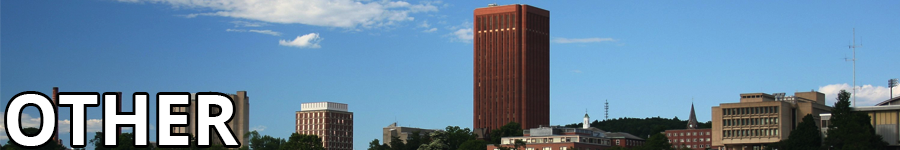
<style>
.page{position:relative;width:900px;height:150px}
.page>*{position:absolute;margin:0}
.t1{font:70px "OpenSans-Bold";color:#ffffff}
</style>
<div class="page">
<p class="t1" style="left:7px;top:94px;width:232px;height:52px">OTHER</p>
</div>
